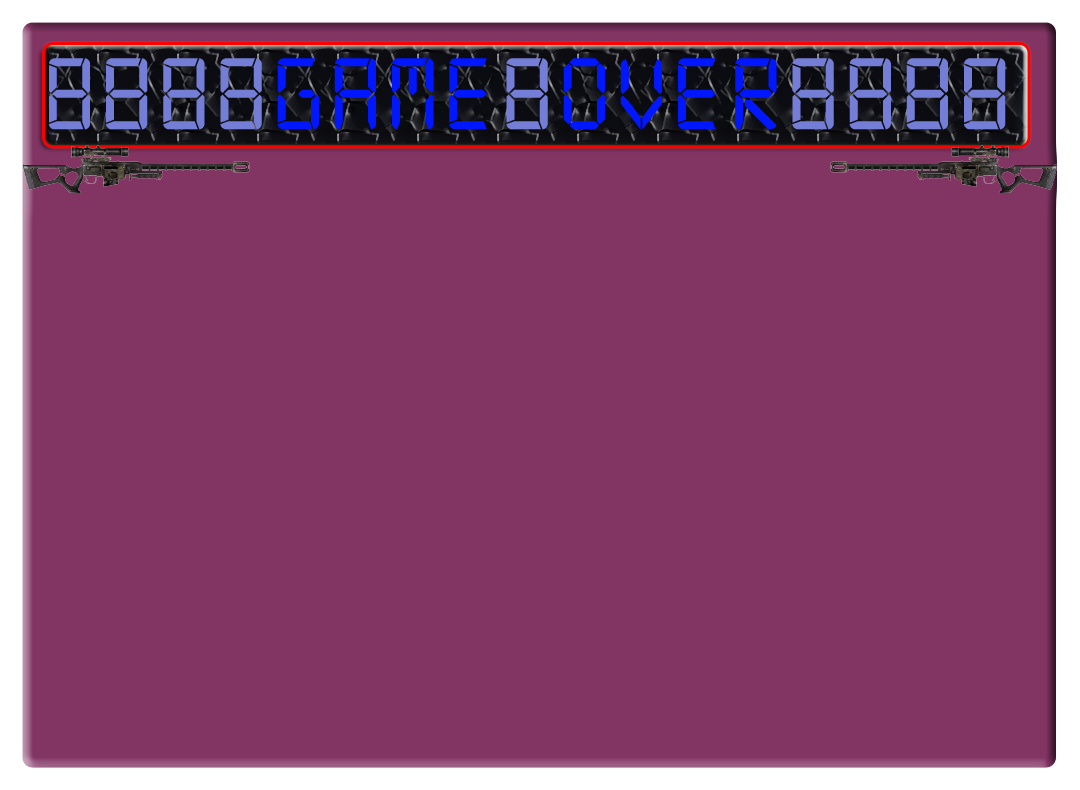
<style>
.page{position:relative;width:1080px;height:790px;background:#823463}
.page>*{position:absolute;margin:0}
.t1{font:108px "Digital-7Mono";letter-spacing:0.075em;color:#757ed7}
.t2{font:108px "Digital-7Mono";letter-spacing:0.075em;color:#0017ff}
</style>
<div class="page">
<p class="t1" style="left:48px;top:58px;width:958px;height:72px">8888<span class="t2">game</span>8<span class="t2">over</span>88888</p>
</div>
